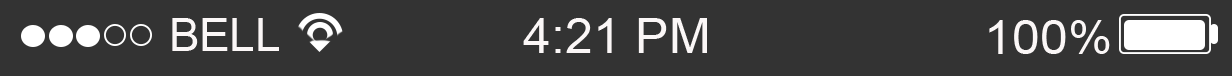
<style>
.page{position:relative;width:1232px;height:76px;background:#333333}
.page>*{position:absolute;margin:0}
.t1{font:45.6px "ArialMT";color:#fbf7f7}
.t2{font:48.5px "ArialMT";color:#fbf7f7;scale:1.04 1}
.t3{font:47.4px "ArialMT";color:#fbf7f7;scale:1.06 1}
</style>
<div class="page">
<p class="t1" style="left:172px;top:18px;width:107px;height:33px">BELL</p>
<p class="t2" style="left:523px;top:18px;width:184px;height:35px">4:21 PM</p>
<p class="t3" style="left:989px;top:20px;width:121px;height:34px">100%</p>
</div>
